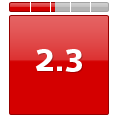
<style>
.page{position:relative;width:117px;height:117px;background:#d40000}
.page>*{position:absolute;margin:0}
.t1{font:36px "Colaborate-Bold";color:#ffffff;text-transform:uppercase}
</style>
<div class="page">
<p class="t1" style="left:35px;top:49px;width:47px;height:23px">2.3</p>
</div>
